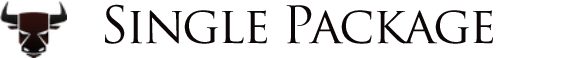
<style>
.page{position:relative;width:579px;height:58px;background:#ffffff}
.page>*{position:absolute;margin:0}
.t1{font:50px "TrajanPro-Regular";letter-spacing:-0.04em;color:#0e0707}
</style>
<div class="page">
<p class="t1" style="left:105px;top:4px;width:388px;height:40px">Single Package</p>
</div>
